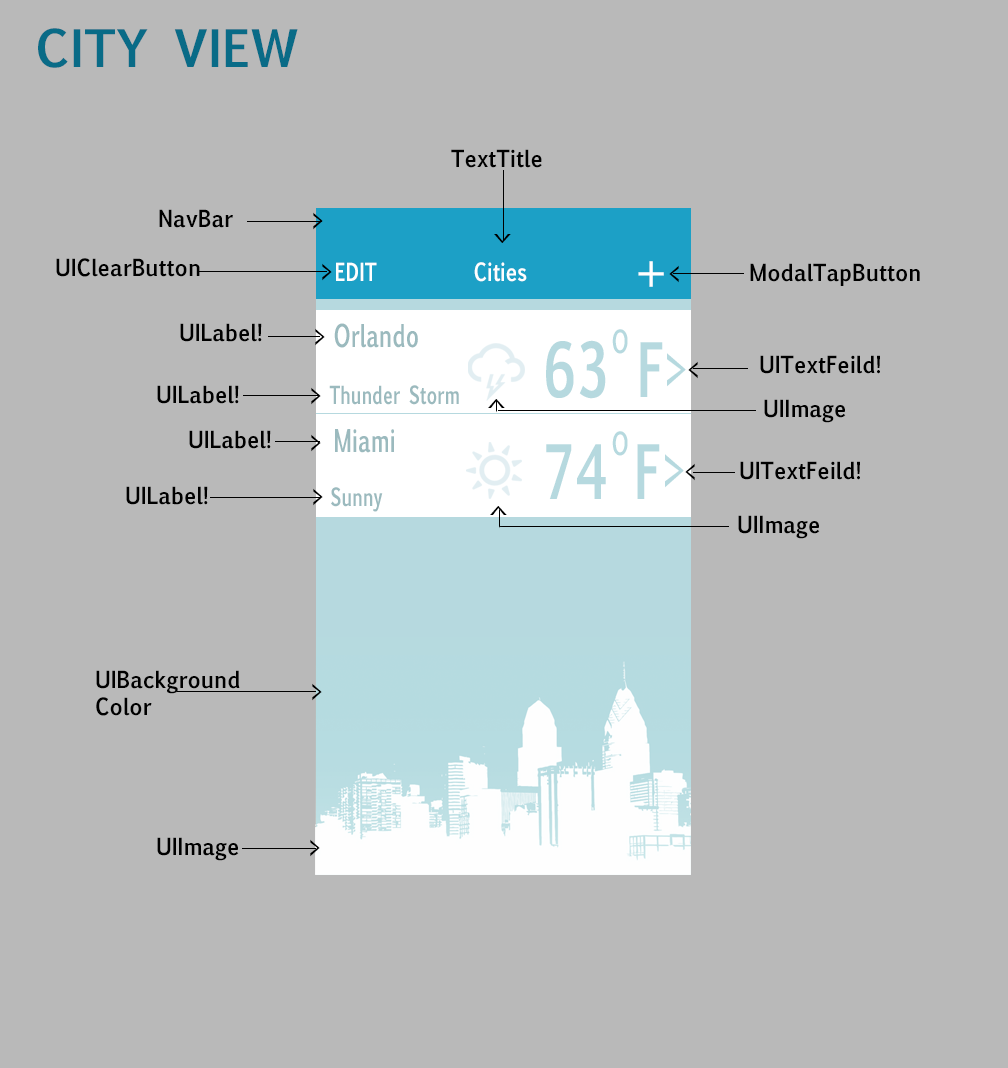
<style>
.page{position:relative;width:1008px;height:1068px;background:#b9b9b9}
.page>*{position:absolute;margin:0}
.t1{font:49.3px "EuphemiaUCAS-Bold";color:#096b87}
.t2{font:22.6px "EuphemiaUCAS-Bold";color:#000000;scale:0.92 1}
.t3{font:24px "EuphemiaUCAS-Bold";color:#000000;scale:0.7 1}
.t4{font:24.2px "EuphemiaUCAS-Bold";color:#000000;scale:0.69 1}
.t5{font:24px "EuphemiaUCAS-Bold";color:#ffffff;scale:0.8 1}
.t6{font:48px "EuphemiaUCAS";color:#ffffff;scale:1.05 1}
.t7{font:30px "EuphemiaUCAS-Bold";color:#9bbabe;scale:0.7 1}
.t8{font:30.3px "EuphemiaUCAS-Bold";color:#b6d9df;scale:0.7 1}
.t9{font:71.5px "EuphemiaUCAS-Bold";color:#b6d9df;scale:0.7 1}
.t10{font:48px "EuphemiaUCAS-Bold";color:#b6d9df;scale:0.7 1}
.t11{font:24px "EuphemiaUCAS-Bold";color:#9bbabe;scale:0.7 1}
</style>
<div class="page">
<p class="t1" style="left:38px;top:28px;width:260px;height:40px">CITY VIEW</p>
<p class="t2" style="left:451px;top:149px;width:91px;height:19px">TextTitle</p>
<p class="t2" style="left:159px;top:209px;width:74px;height:19px">NavBar</p>
<p class="t3" style="left:313px;top:212px;width:10px;height:18px">&gt;</p>
<p class="t4" style="left:494px;top:234px;width:17px;height:9px;rotate:90deg">&gt;</p>
<p class="t2" style="left:56px;top:258px;width:144px;height:19px">UIClearButton</p>
<p class="t3" style="left:322px;top:263px;width:10px;height:18px">&gt;</p>
<p class="t5" style="left:336px;top:262px;width:41px;height:19px">EDIT</p>
<p class="t5" style="left:474px;top:262px;width:53px;height:20px">Cities</p>
<p class="t6" style="left:638px;top:261px;width:26px;height:26px">+</p>
<p class="t3" style="left:669px;top:265px;width:10px;height:18px;rotate:180deg">&gt;</p>
<p class="t2" style="left:750px;top:263px;width:170px;height:23px">ModalTapButton</p>
<p class="t2" style="left:180px;top:323px;width:82px;height:19px">UILabel!</p>
<p class="t3" style="left:315px;top:328px;width:10px;height:18px">&gt;</p>
<p class="t7" style="left:334px;top:323px;width:84px;height:25px">Orlando</p>
<p class="t8" style="left:612px;top:329px;width:16px;height:25px">O</p>
<p class="t9" style="left:546px;top:340px;width:117px;height:59px">63 F</p>
<p class="t10" style="left:667px;top:353px;width:19px;height:34px">&gt;</p>
<p class="t3" style="left:688px;top:361px;width:10px;height:18px;rotate:180deg">&gt;</p>
<p class="t2" style="left:760px;top:355px;width:120px;height:19px">UITextFeild!</p>
<p class="t2" style="left:157px;top:385px;width:82px;height:19px">UILabel!</p>
<p class="t3" style="left:311px;top:387px;width:10px;height:18px">&gt;</p>
<p class="t11" style="left:329px;top:385px;width:130px;height:20px">Thunder Storm</p>
<p class="t4" style="left:488px;top:399px;width:17px;height:9px;rotate:-90deg">&gt;</p>
<p class="t2" style="left:764px;top:399px;width:82px;height:24px">UIImage</p>
<p class="t2" style="left:189px;top:430px;width:82px;height:19px">UILabel!</p>
<p class="t3" style="left:311px;top:434px;width:10px;height:18px">&gt;</p>
<p class="t7" style="left:335px;top:429px;width:59px;height:24px">Miami</p>
<p class="t8" style="left:612px;top:431px;width:16px;height:25px">O</p>
<p class="t9" style="left:546px;top:444px;width:114px;height:55px">74 F</p>
<p class="t10" style="left:665px;top:454px;width:19px;height:34px">&gt;</p>
<p class="t2" style="left:740px;top:461px;width:120px;height:19px">UITextFeild!</p>
<p class="t3" style="left:685px;top:463px;width:10px;height:18px;rotate:180deg">&gt;</p>
<p class="t2" style="left:126px;top:486px;width:82px;height:19px">UILabel!</p>
<p class="t3" style="left:313px;top:488px;width:10px;height:18px">&gt;</p>
<p class="t11" style="left:331px;top:487px;width:52px;height:25px">Sunny</p>
<p class="t4" style="left:490px;top:506px;width:17px;height:9px;rotate:-90deg">&gt;</p>
<p class="t2" style="left:738px;top:515px;width:82px;height:24px">UIImage</p>
<p class="t2" style="left:96px;top:670px;width:144px;height:46px">UIBackground<br>Color</p>
<p class="t3" style="left:312px;top:683px;width:10px;height:18px">&gt;</p>
<p class="t2" style="left:157px;top:837px;width:82px;height:24px">UIImage</p>
<p class="t3" style="left:310px;top:839px;width:10px;height:18px">&gt;</p>
</div>
